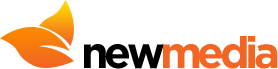
<style>
.page{position:relative;width:278px;height:69px;background:#ffffff}
.page>*{position:absolute;margin:0}
.t1{font:44px "GothamBold";letter-spacing:-0.1em;color:#f26522}
.t2{font:44px "GothamBold";letter-spacing:-0.1em;color:#000000}
</style>
<div class="page">
<p class="t1" style="left:84px;top:36px;width:194px;height:33px"><span class="t2">new</span>media</p>
</div>
